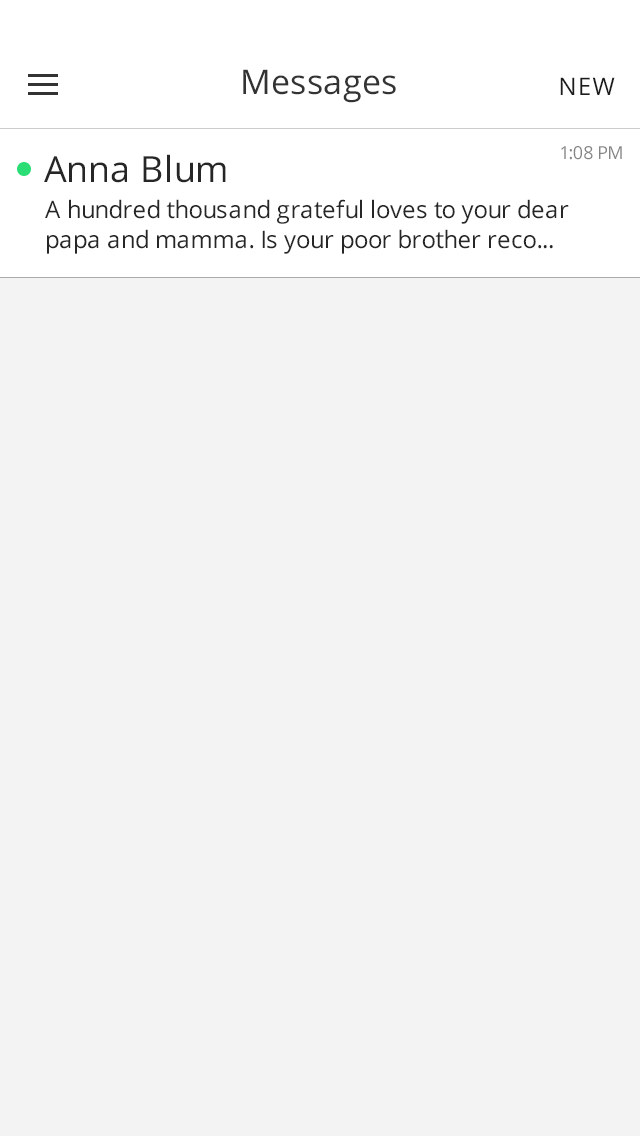
<style>
.page{position:relative;width:640px;height:1136px;background:#f3f3f3}
.page>*{position:absolute;margin:0}
.t1{font:34px "OpenSans";letter-spacing:0.01em;color:#333333}
.t2{font:24px "OpenSans";letter-spacing:0.05em;color:#1c1c1c;text-transform:uppercase}
.t3{font:18px "OpenSans";color:#858585}
.t4{font:36px "OpenSans";color:#262626}
.t5{font:24px/30px "OpenSans";color:#262626}
</style>
<div class="page">
<p class="t1" style="left:243px;top:69px;width:153px;height:34px">Messages</p>
<p class="t2" style="left:560px;top:77px;width:55px;height:18px">new</p>
<p class="t3" style="left:561px;top:146px;width:61px;height:14px">1:08 PM</p>
<p class="t4" style="left:44px;top:154px;width:182px;height:29px">Anna Blum</p>
<p class="t5" style="left:45px;top:199px;width:524px;height:55px">A hundred thousand grateful loves to your dear papa and mamma. Is your poor brother reco...</p>
</div>
